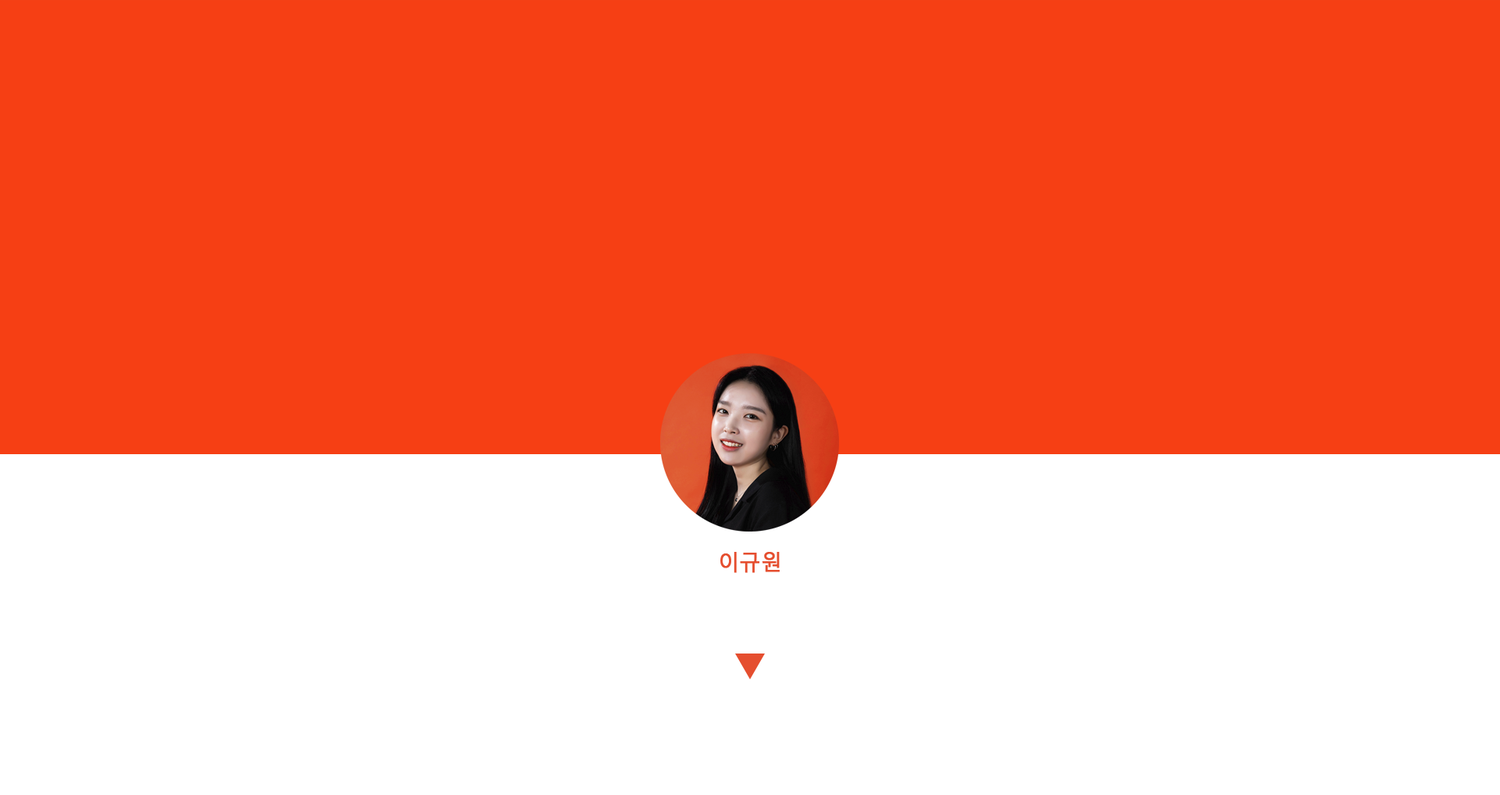
<style>
.page{position:relative;width:1500px;height:795px;background:#f63f14}
.page>*{position:absolute;margin:0}
.t1{font:20.8px "MalgunGothic";color:#e54e2f;font-weight:bold}
</style>
<div class="page">
<p class="t1" style="left:721px;top:552px;width:59px;height:21px">이규원</p>
</div>
